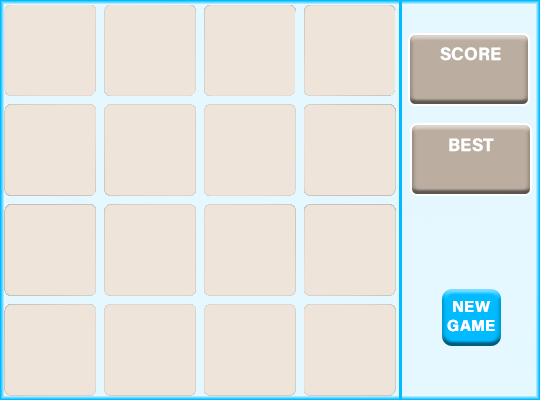
<style>
.page{position:relative;width:540px;height:400px;background:#eee4da}
.page>*{position:absolute;margin:0}
.t1{font:18px "AcuminConcept-Bold";color:#ffffff}
.t2{font:16px "AcuminConcept-Bold";color:#ffffff}
</style>
<div class="page">
<p class="t1" style="left:440px;top:47px;width:61px;height:14px">SCORE</p>
<p class="t1" style="left:449px;top:138px;width:45px;height:14px">BEST</p>
<p class="t2" style="left:447px;top:301px;width:48px;height:31px;text-align:center">NEW<br>GAME</p>
</div>
